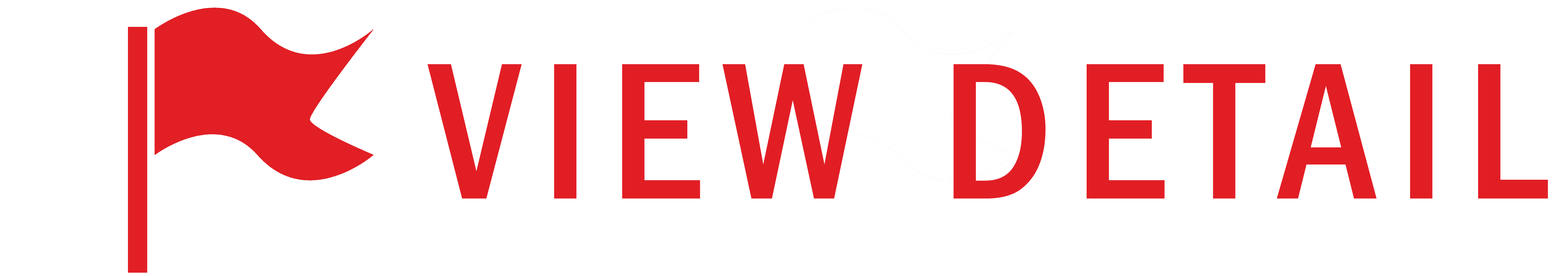
<style>
.page{position:relative;width:1568px;height:276px;background:#ffffff}
.page>*{position:absolute;margin:0}
.t1{font:201.4px "FranklinGothic-MediumCond";letter-spacing:0.1em;color:#e21e25}
</style>
<div class="page">
<p class="t1" style="left:427px;top:64px;width:1121px;height:135px">VIEW DETAIL</p>
</div>
